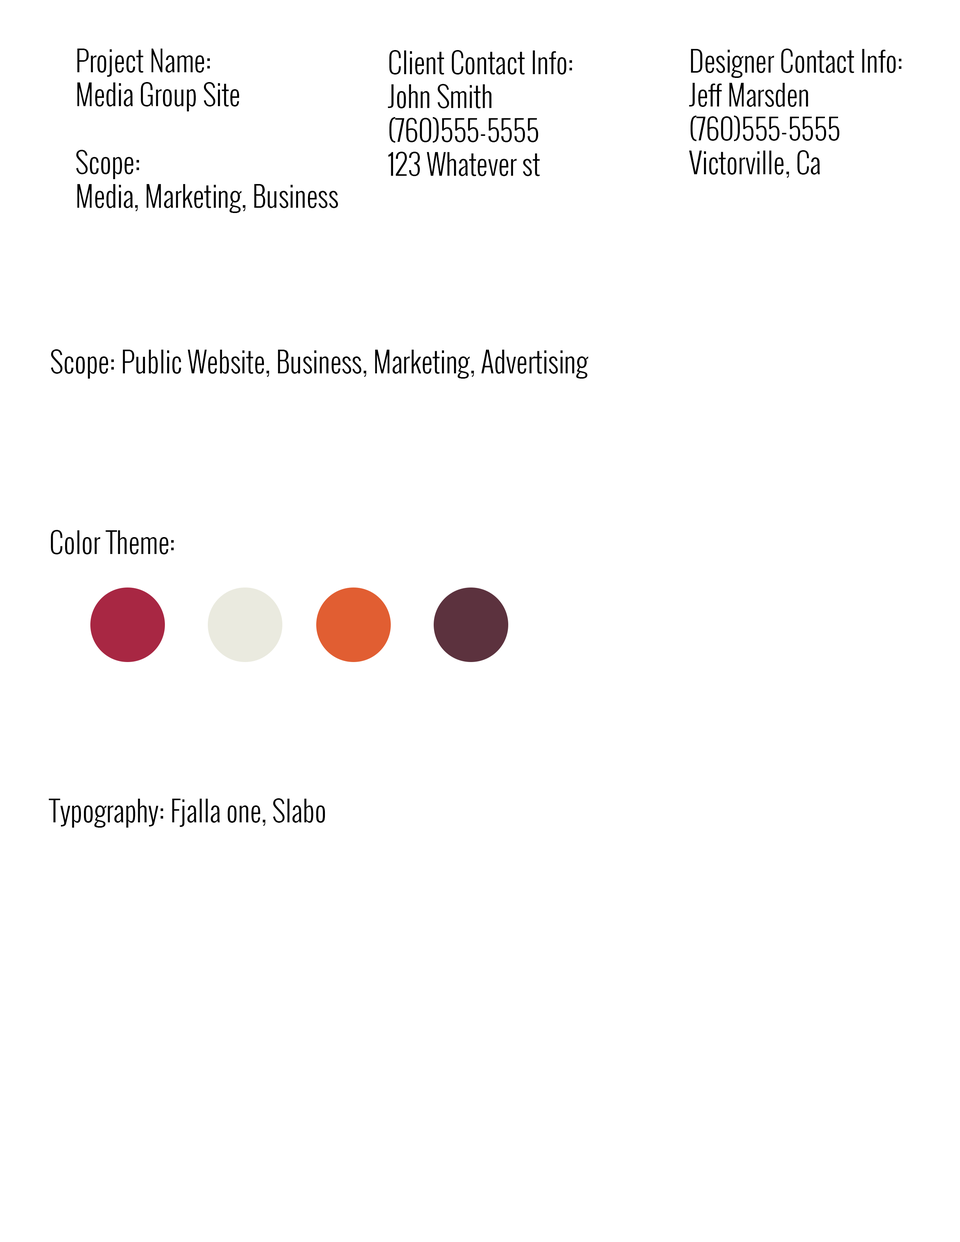
<style>
.page{position:relative;width:960px;height:1242px;background:#ffffff}
.page>*{position:absolute;margin:0}
.t1{font:28.2px "Oswald-Light";color:#000000}
</style>
<div class="page">
<p class="t1" style="left:76px;top:49px;width:262px;height:164px">Project Name: <br>Media Group Site<br><br>Scope:<br>Media, Marketing, Business</p>
<p class="t1" style="left:388px;top:50px;width:184px;height:126px">Client Contact Info:<br>John Smith<br>(760)555-5555<br>123 Whatever st</p>
<p class="t1" style="left:689px;top:49px;width:213px;height:129px">Designer Contact Info:<br>Jeff Marsden<br>(760)555-5555<br>Victorville, Ca</p>
<p class="t1" style="left:51px;top:349px;width:537px;height:30px">Scope: Public Website, Business, Marketing, Advertising</p>
<p class="t1" style="left:51px;top:530px;width:123px;height:24px">Color Theme:</p>
<p class="t1" style="left:49px;top:798px;width:276px;height:30px">Typography: Fjalla one, Slabo</p>
</div>
